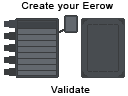
<style>
.page{position:relative;width:128px;height:96px;background:#ffffff}
.page>*{position:absolute;margin:0}
.t1{font:10px "ArialMT";letter-spacing:0.05em;color:#000000}
</style>
<div class="page">
<p class="t1" style="left:21px;top:2px;width:92px;height:9px">Create your Eerow</p>
<p class="t1" style="left:51px;top:86px;width:39px;height:7px">Validate</p>
</div>
